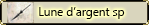
<style>
.page{position:relative;width:149px;height:25px;background:#d9d5bd}
.page>*{position:absolute;margin:0}
.t1{font:11.7px "LaoUI";color:#000000}
</style>
<div class="page">
<p class="t1" style="left:39px;top:7px;width:86px;height:12px">Lune d’argent sp</p>
</div>
